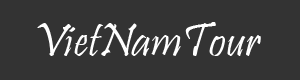
<style>
.page{position:relative;width:300px;height:80px;background:#333333}
.page>*{position:absolute;margin:0}
.t1{font:48px "Pristina-Regular";color:#ffffff}
</style>
<div class="page">
<p class="t1" style="left:37px;top:22px;width:224px;height:34px">VietNamTour</p>
</div>
